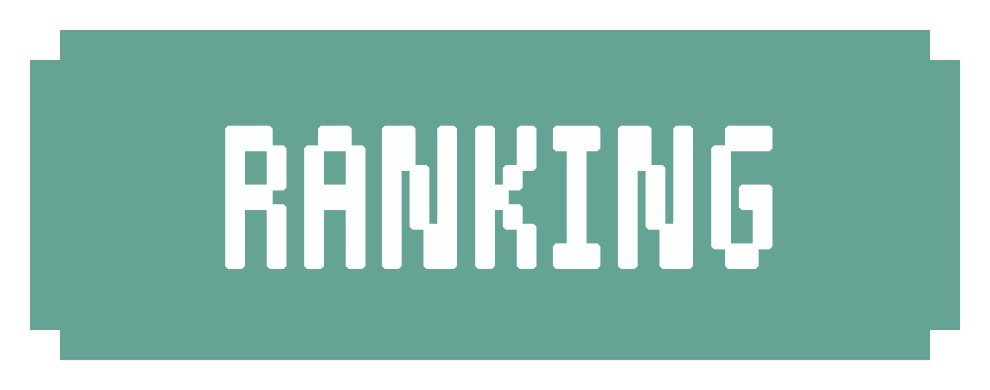
<style>
.page{position:relative;width:990px;height:390px;background:#65a394}
.page>*{position:absolute;margin:0}
.t1{font:255px "Pixelade";letter-spacing:0.025em;color:#fcfefe;font-weight:bold;scale:0.71 1}
</style>
<div class="page">
<p class="t1" style="left:225px;top:125px;width:548px;height:144px">RANKING</p>
</div>
